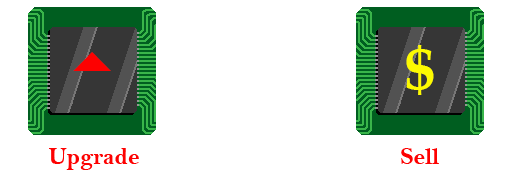
<style>
.page{position:relative;width:512px;height:192px;background:#ffffff}
.page>*{position:absolute;margin:0}
.t1{font:60px "BookAntiqua-Bold";color:#fdfa01}
.t2{font:24px "BellMTBold";color:#fd0101}
</style>
<div class="page">
<p class="t1" style="left:406px;top:45px;width:28px;height:50px">$</p>
<p class="t2" style="left:49px;top:148px;width:90px;height:22px">Upgrade</p>
<p class="t2" style="left:401px;top:148px;width:38px;height:16px">Sell</p>
</div>
